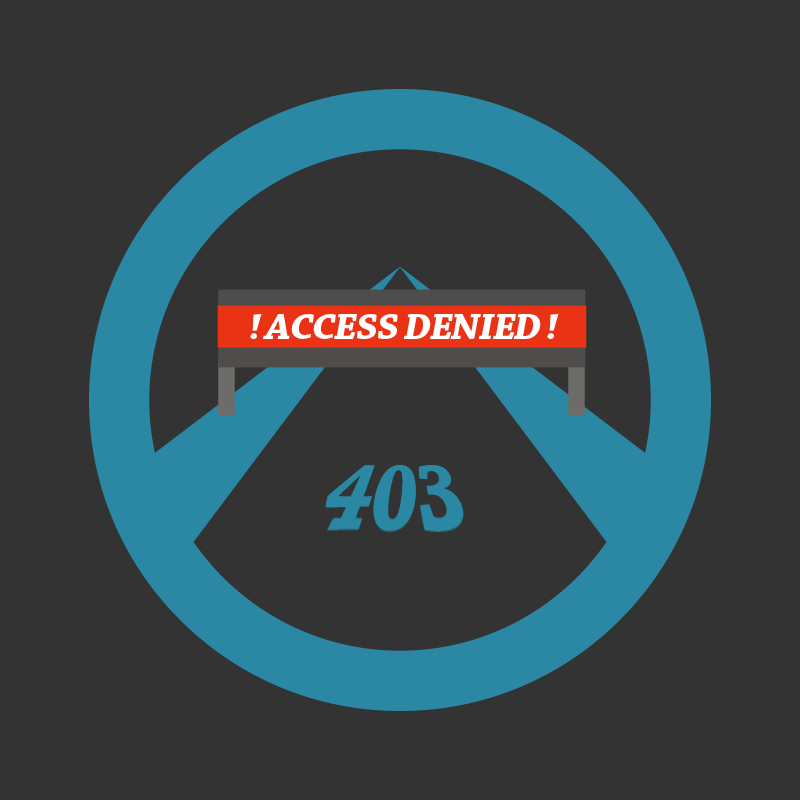
<style>
.page{position:relative;width:800px;height:800px;background:#333333}
.page>*{position:absolute;margin:0}
.t1{font:37.5px "ChaparralPro-BoldIt";letter-spacing:-0.035em;color:#ffffff;scale:1.08 1}
</style>
<div class="page">
<p class="t1" style="left:250px;top:314px;width:309px;height:25px">! ACCESS DENIED !</p>
</div>
